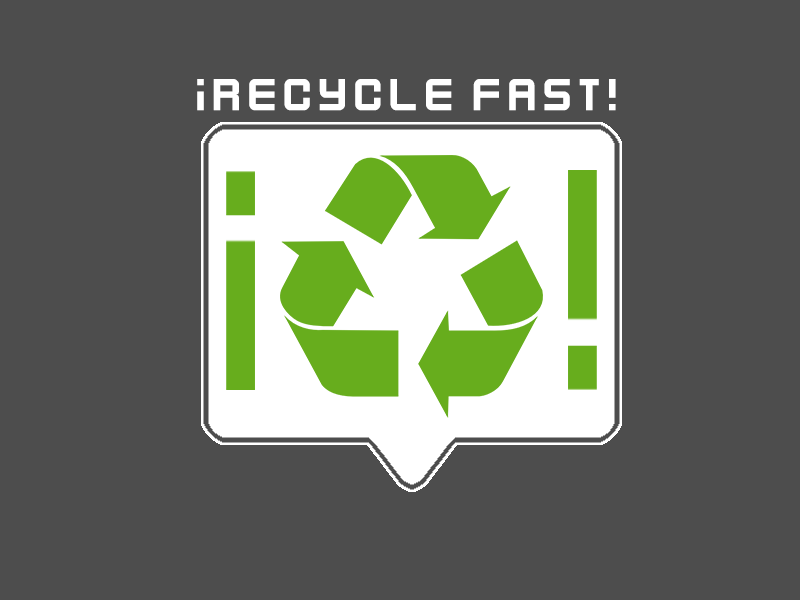
<style>
.page{position:relative;width:800px;height:600px;background:#4d4d4d}
.page>*{position:absolute;margin:0}
.t1{font:50px "KenVector-Future-Thin";color:#ffffff}
</style>
<div class="page">
<p class="t1" style="left:197px;top:79px;width:419px;height:32px">¡Recycle Fast!</p>
</div>
